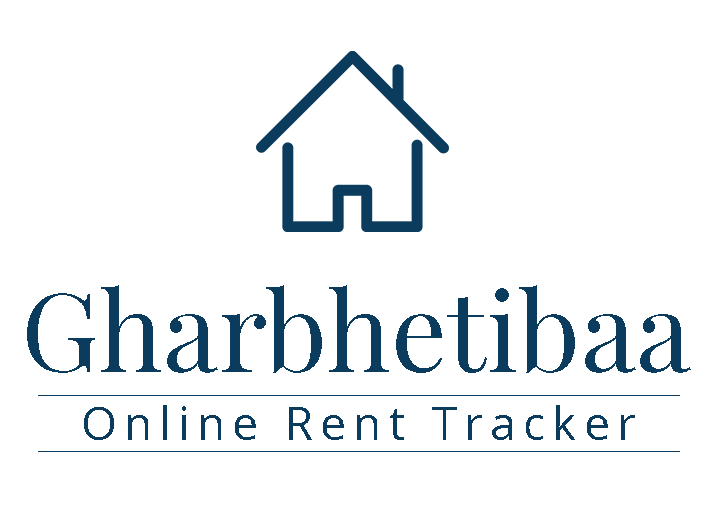
<style>
.page{position:relative;width:716px;height:520px;background:#ffffff}
.page>*{position:absolute;margin:0}
.t1{font:110.5px "PlayfairDisplay-Regular";color:#0b3c5d}
.t2{font:45.8px "OpenSans";letter-spacing:0.16em;color:#0b3c5d}
</style>
<div class="page">
<p class="t1" style="left:27px;top:285px;width:664px;height:88px">Gharbhetibaa</p>
<p class="t2" style="left:84px;top:405px;width:551px;height:35px">Online Rent Tracker</p>
</div>
